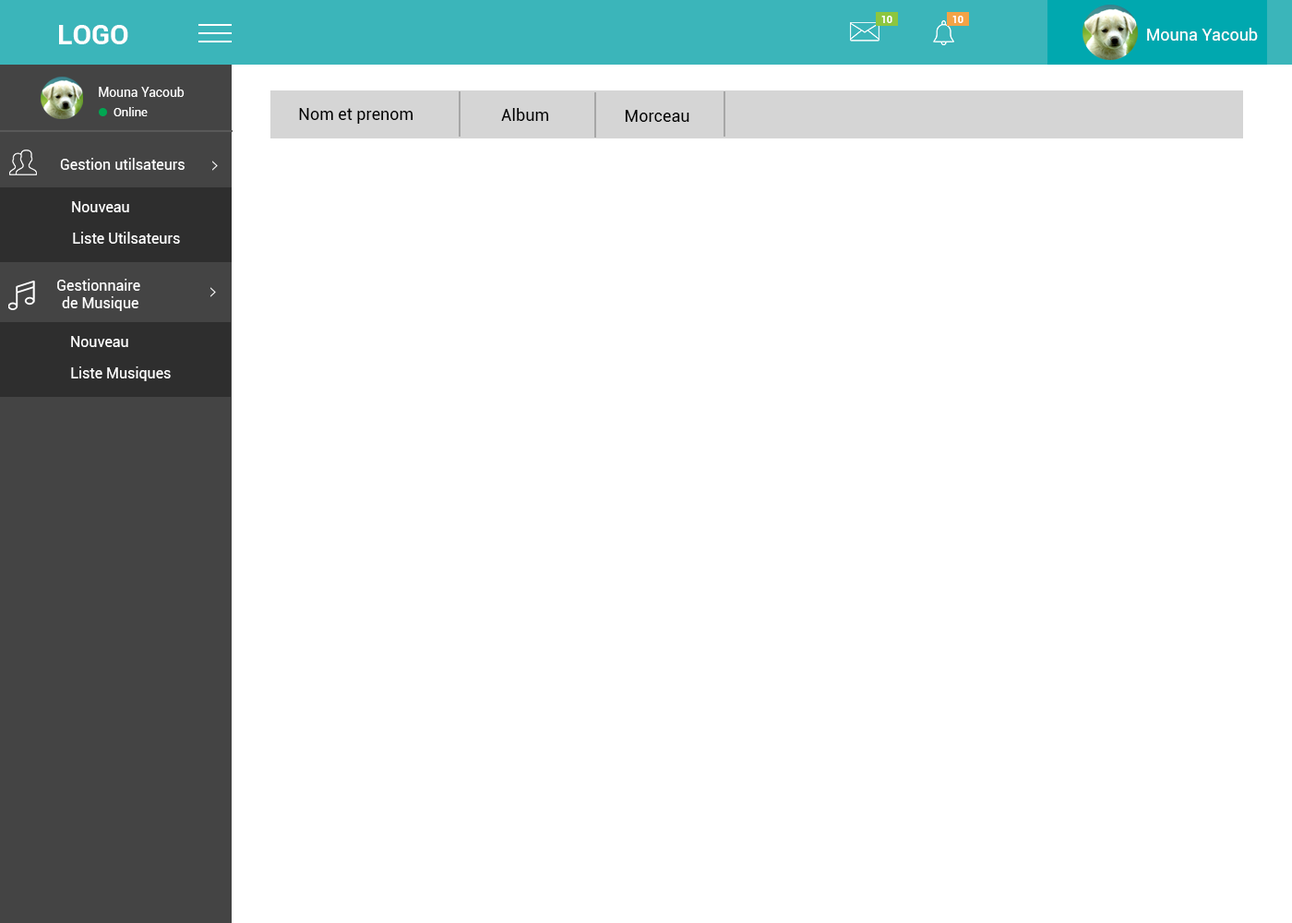
<style>
.page{position:relative;width:1292px;height:923px;background:#ffffff}
.page>*{position:absolute;margin:0}
.t1{font:10.2px "Roboto-Bold";color:#ffffff;text-transform:uppercase}
.t2{font:27.7px "Roboto-Bold";color:#ffffff;text-transform:uppercase}
.t3{font:16.6px "Roboto-Regular";color:#ffffff}
.t4{font:12.7px "Roboto-Regular";color:#ffffff}
.t5{font:12px "Roboto-Regular";color:#ffffff}
.t6{font:16.6px "Roboto-Regular";color:#000000}
.t7{font:14.8px "Roboto-Regular";color:#ffffff}
</style>
<div class="page">
<p class="t1" style="left:881px;top:16px;width:11px;height:7px">10</p>
<p class="t1" style="left:952px;top:16px;width:12px;height:7px">10</p>
<p class="t2" style="left:59px;top:25px;width:69px;height:19px">Logo</p>
<p class="t3" style="left:1147px;top:28px;width:111px;height:13px">Mouna Yacoub</p>
<p class="t4" style="left:99px;top:87px;width:86px;height:10px">Mouna Yacoub</p>
<p class="t5" style="left:114px;top:107px;width:34px;height:9px">Online</p>
<p class="t6" style="left:299px;top:108px;width:114px;height:16px">Nom et prenom</p>
<p class="t6" style="left:501px;top:108px;width:48px;height:13px">Album</p>
<p class="t6" style="left:625px;top:110px;width:64px;height:12px">Morceau</p>
<p class="t7" style="left:60px;top:158px;width:125px;height:12px">Gestion utilsateurs</p>
<p class="t7" style="left:72px;top:201px;width:57px;height:11px">Nouveau</p>
<p class="t7" style="left:73px;top:232px;width:107px;height:12px">Liste Utilsateurs</p>
<p class="t7" style="left:57px;top:279px;width:83px;height:32px;text-align:center">Gestionnaire <br>de Musique</p>
<p class="t7" style="left:71px;top:336px;width:57px;height:11px">Nouveau</p>
<p class="t7" style="left:71px;top:366px;width:100px;height:15px">Liste Musiques</p>
</div>
